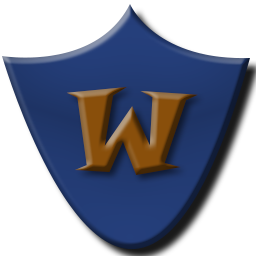
<style>
.page{position:relative;width:256px;height:256px;background:#ffffff}
.page>*{position:absolute;margin:0}
.t1{font:118px "SnapITC-Regular"}
</style>
<div class="page">
<p class="t1" style="left:66px;top:87px;width:132px;height:88px">W</p>
</div>
